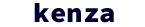
<style>
.page{position:relative;width:145px;height:27px;background:#ffffff}
.page>*{position:absolute;margin:0}
.t1{font:27.4px "SourceCodeRoman-Black";color:#000033}
</style>
<div class="page">
<p class="t1" style="left:34px;top:3px;width:80px;height:20px">kenza</p>
</div>
